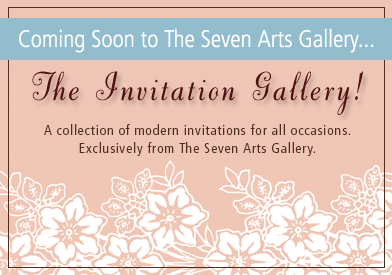
<style>
.page{position:relative;width:392px;height:275px;background:#efc6b5}
.page>*{position:absolute;margin:0}
.t1{font:24px "Frutiger-LightCn";color:#ffffff}
.t2{font:48px "DorchesterScriptMT";letter-spacing:0.05em;color:#4f1011}
.t3{font:14px/18px "Frutiger-Cn";letter-spacing:0.05em;color:#4f2e21}
</style>
<div class="page">
<p class="t1" style="left:19px;top:28px;width:355px;height:25px">Coming Soon to The Seven Arts Gallery...</p>
<p class="t2" style="left:32px;top:71px;width:331px;height:44px">The Invitation Gallery!</p>
<p class="t3" style="left:44px;top:124px;width:306px;height:32px;text-align:center">A collection of modern invitations for all occasions.<br>Exclusively from The Seven Arts Gallery.</p>
</div>
